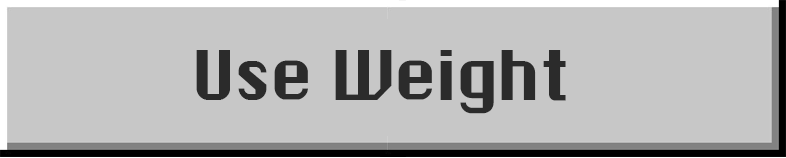
<style>
.page{position:relative;width:786px;height:158px;background:#c7c7c7}
.page>*{position:absolute;margin:0}
.t1{font:66.6px "ChicagoFLF";letter-spacing:-0.04em;color:#2b2b2b}
</style>
<div class="page">
<p class="t1" style="left:196px;top:50px;width:370px;height:64px">Use Weight</p>
</div>
